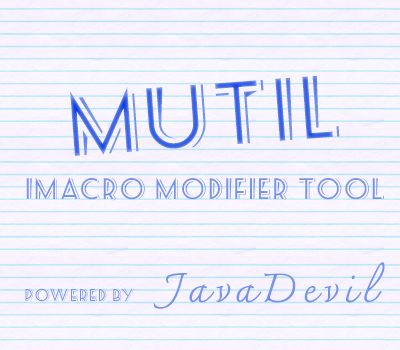
<style>
.page{position:relative;width:400px;height:350px}
.page>*{position:absolute;margin:0}
.t1{font:72px "SeasideResortNF";letter-spacing:0.1em}
.t2{font:24px "SeasideResortNF";letter-spacing:0.1em;color:#7894ea}
.t3{font:48px "THCharmonman";letter-spacing:0.1em;color:#7894ea}
.t4{font:14px "SeasideResortNF";letter-spacing:0.1em;color:#7894ea}
</style>
<div class="page">
<p class="t1" style="left:70px;top:75px;width:270px;height:81px;rotate:-4deg">MutiL</p>
<p class="t2" style="left:26px;top:177px;width:358px;height:24px">iMacro Modifier tool</p>
<p class="t3" style="left:153px;top:262px;width:232px;height:47px">JavaDevil</p>
<p class="t4" style="left:25px;top:288px;width:109px;height:14px">Powered by</p>
</div>
